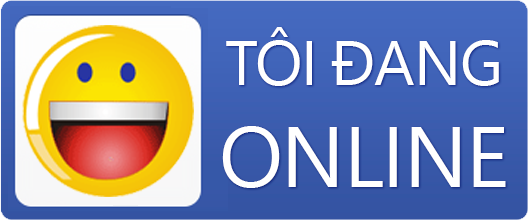
<style>
.page{position:relative;width:528px;height:220px}
.page>*{position:absolute;margin:0}
.t1{font:63px "SegoeUI";letter-spacing:-0.05em;color:#ffffff;text-transform:uppercase}
.t2{font:85px "SegoeUI";letter-spacing:-0.05em;color:#ffffff;text-transform:uppercase}
</style>
<div class="page">
<p class="t1" style="left:222px;top:27px;width:284px;height:161px;text-align:center">tôi đang<br><span class="t2">online</span></p>
</div>
